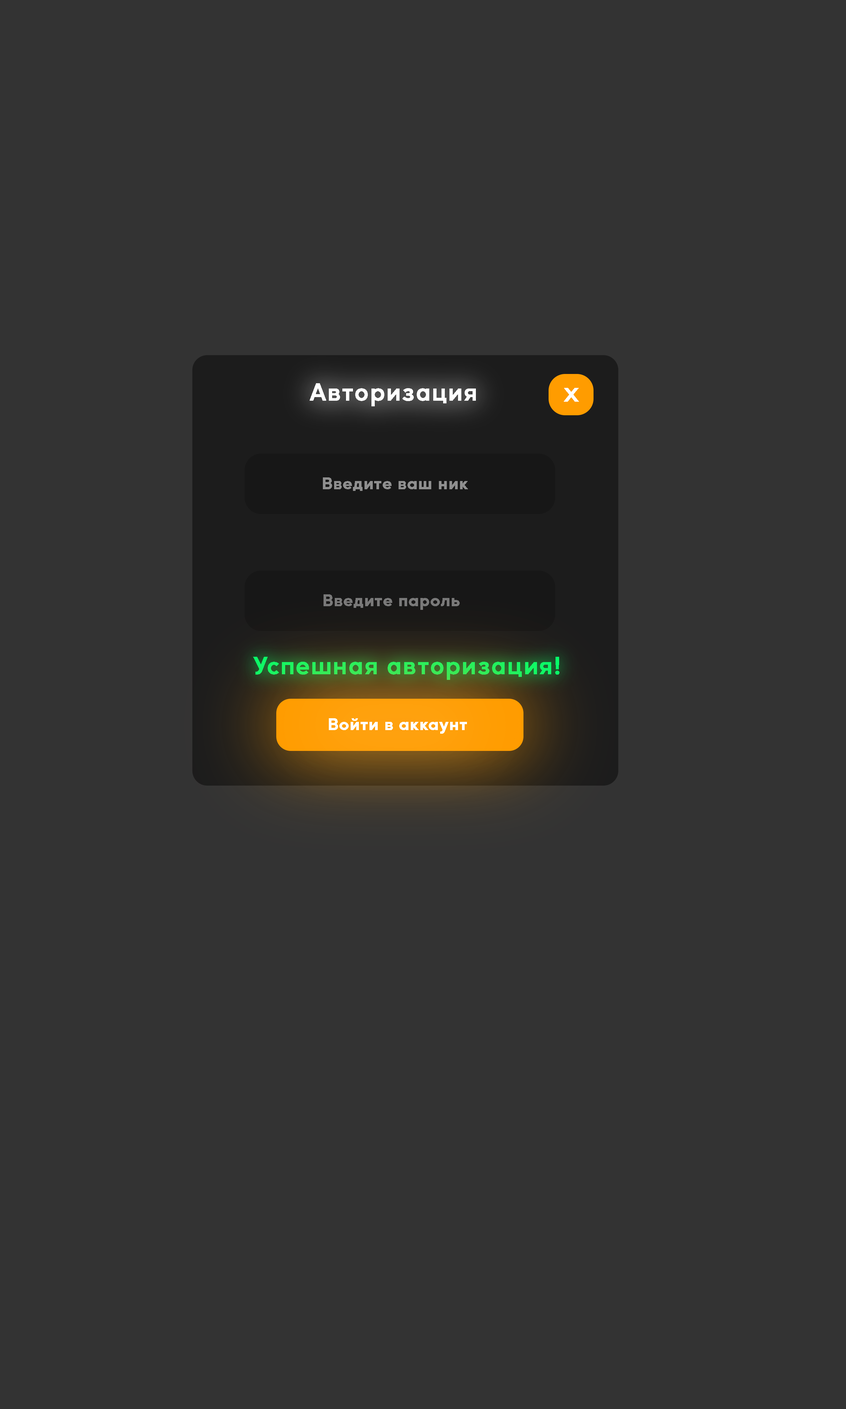
<style>
.page{position:relative;width:846px;height:1409px;background:#333333}
.page>*{position:absolute;margin:0}
.t1{font:23.8px "MusticaPro-SemiBold";letter-spacing:0.05em;color:#ffffff;font-weight:bold}
.t2{font:19px "MusticaPro-SemiBold";letter-spacing:0.05em;color:#ffffff;font-weight:bold;scale:1.24 1}
.t3{font:15.9px "MusticaPro-SemiBold";letter-spacing:0.05em;color:#8f8f8f;font-weight:bold}
.t4{font:15.9px "MusticaPro-SemiBold";letter-spacing:0.05em;color:#797979;font-weight:bold}
.t5{font:23.8px "MusticaPro-SemiBold";letter-spacing:0.05em;color:#2bef5b;font-weight:bold}
.t6{font:15.9px "MusticaPro-SemiBold";letter-spacing:0.05em;color:#ffffff;font-weight:bold}
</style>
<div class="page">
<p class="t1" style="left:310px;top:383px;width:166px;height:23px">Авторизация</p>
<p class="t2" style="left:564px;top:388px;width:15px;height:14px">X</p>
<p class="t3" style="left:323px;top:478px;width:145px;height:13px">Введите ваш ник</p>
<p class="t4" style="left:324px;top:595px;width:136px;height:15px">Введите пароль</p>
<p class="t5" style="left:253px;top:657px;width:306px;height:23px">Успешная авторизация!</p>
<p class="t6" style="left:329px;top:718px;width:138px;height:16px">Войти в аккаунт</p>
</div>
